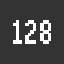
<style>
.page{position:relative;width:64px;height:64px;background:#333333}
.page>*{position:absolute;margin:0}
.t1{font:40.9px "Glasstown-NBP";letter-spacing:0.005em;color:#ffffff;font-weight:bold}
</style>
<div class="page">
<p class="t1" style="left:13px;top:20px;width:38px;height:24px">128</p>
</div>
